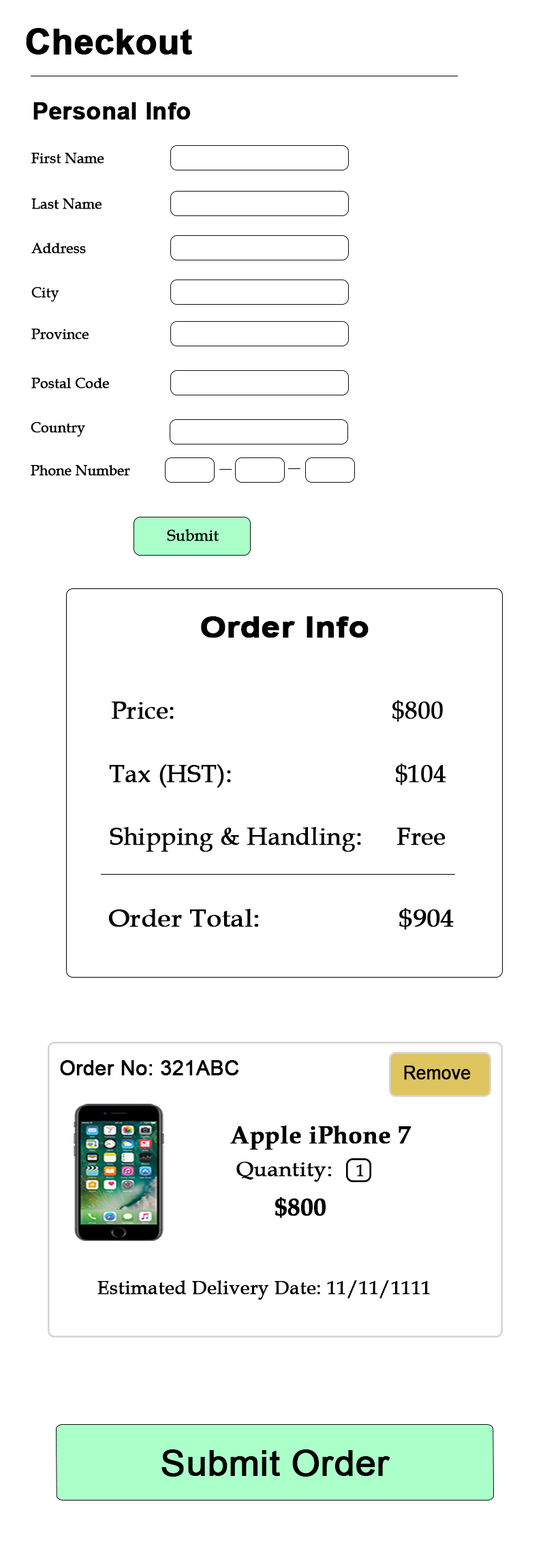
<style>
.page{position:relative;width:545px;height:1568px;background:#ffffff}
.page>*{position:absolute;margin:0}
.t1{font:35.2px "Arial-BoldMT";color:#000000;font-weight:bold}
.t2{font:23.9px "Arial-BoldMT";color:#000000;font-weight:bold}
.t3{font:14.4px "BookAntiqua";color:#000000;font-weight:bold;scale:0.97 1}
.t4{font:16px "BookAntiqua";color:#000000;font-weight:bold;scale:0.97 1}
.t5{font:29.1px "Arial-BoldMT";color:#000000;font-weight:bold;scale:1.15 1}
.t6{font:24.5px "BookAntiqua";color:#000000;font-weight:bold}
.t7{font:24.5px "BookAntiqua";color:#000000;font-weight:bold;scale:1.07 1}
.t8{font:20.5px "ArialMT";color:#000000;font-weight:bold}
.t9{font:18.5px "ArialMT";color:#000000;font-weight:bold;scale:0.95 1}
.t10{font:24.5px "BookAntiqua-Bold";color:#000000;font-weight:bold}
.t11{font:20.5px "BookAntiqua";color:#000000;font-weight:bold;scale:1.06 1}
.t12{font:16.4px "BookAntiqua";color:#000000;font-weight:bold}
.t13{font:19.1px "BookAntiqua";color:#000000;font-weight:bold}
.t14{font:34.7px "ArialMT";color:#000000;font-weight:bold;scale:1.05 1}
</style>
<div class="page">
<p class="t1" style="left:26px;top:28px;width:166px;height:27px">Checkout</p>
<p class="t2" style="left:33px;top:102px;width:158px;height:18px">Personal Info</p>
<p class="t3" style="left:31px;top:153px;width:73px;height:11px">First Name</p>
<p class="t3" style="left:31px;top:198px;width:71px;height:11px">Last Name</p>
<p class="t3" style="left:31px;top:243px;width:55px;height:11px">Address</p>
<p class="t3" style="left:31px;top:287px;width:28px;height:15px">City</p>
<p class="t3" style="left:31px;top:329px;width:58px;height:11px">Province</p>
<p class="t3" style="left:31px;top:378px;width:79px;height:11px">Postal Code</p>
<p class="t3" style="left:31px;top:422px;width:54px;height:15px">Country</p>
<p class="t3" style="left:31px;top:465px;width:99px;height:11px">Phone Number</p>
<p class="t4" style="left:167px;top:529px;width:52px;height:12px">Submit</p>
<p class="t5" style="left:201px;top:616px;width:168px;height:22px">Order Info</p>
<p class="t6" style="left:111px;top:700px;width:332px;height:22px">Price:                                $800</p>
<p class="t6" style="left:109px;top:764px;width:337px;height:24px">Tax (HST):                        $104</p>
<p class="t6" style="left:110px;top:827px;width:336px;height:25px">Shipping &amp; Handling:     Free</p>
<p class="t7" style="left:108px;top:908px;width:346px;height:22px">Order Total:                   $904</p>
<p class="t8" style="left:60px;top:1060px;width:179px;height:16px">Order No: 321ABC</p>
<p class="t9" style="left:404px;top:1066px;width:67px;height:14px">Remove</p>
<p class="t10" style="left:230px;top:1126px;width:182px;height:24px">Apple iPhone 7</p>
<p class="t11" style="left:237px;top:1162px;width:95px;height:20px">Quantity:</p>
<p class="t12" style="left:357px;top:1164px;width:7px;height:13px">1</p>
<p class="t10" style="left:275px;top:1197px;width:51px;height:21px">$800</p>
<p class="t13" style="left:97px;top:1280px;width:333px;height:20px">Estimated Delivery Date: 11/11/1111</p>
<p class="t14" style="left:162px;top:1449px;width:229px;height:28px">Submit Order</p>
</div>
